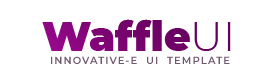
<style>
.page{position:relative;width:280px;height:80px;background:#ffffff}
.page>*{position:absolute;margin:0}
.t1{font:41px "Montserrat-Black";color:#7a0470}
.t2{font:41px "Montserrat-Light";color:#7a0470}
.t3{font:10px "Montserrat-SemiBold";letter-spacing:0.11em;color:#725870}
</style>
<div class="page">
<p class="t1" style="left:42px;top:19px;width:189px;height:32px">Waffle<span class="t2">UI</span></p>
<p class="t3" style="left:51px;top:56px;width:179px;height:8px">INNOVATIVE-E  UI  TEMPLATE</p>
</div>
